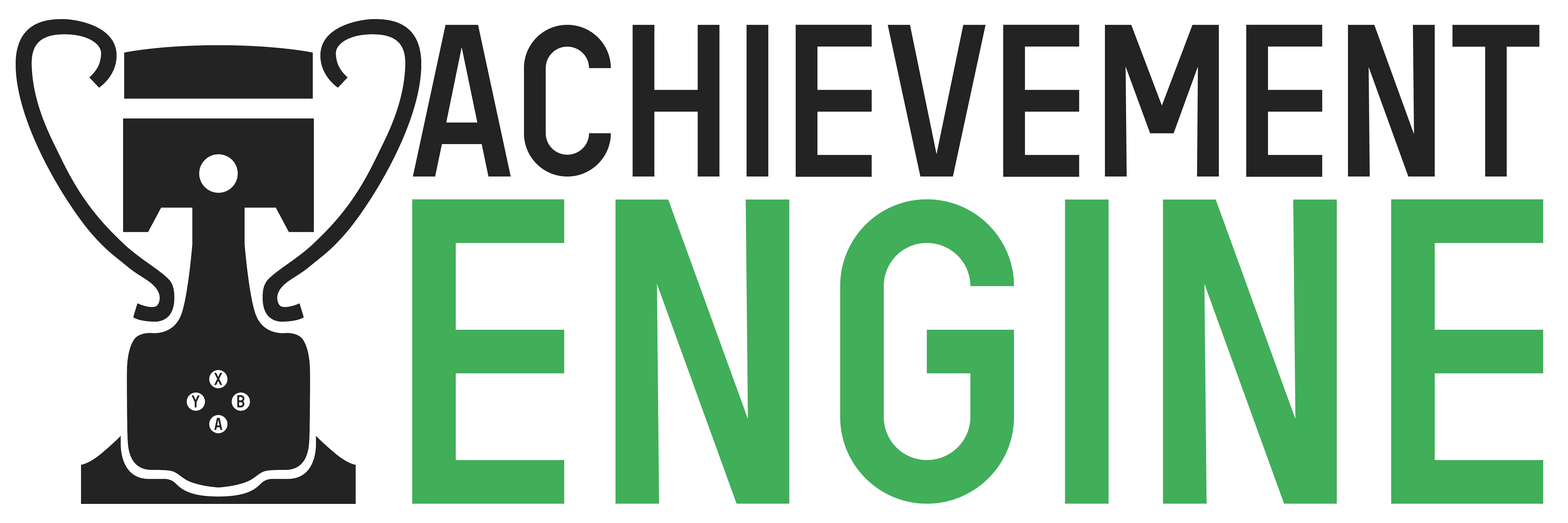
<style>
.page{position:relative;width:1568px;height:523px;background:#ffffff}
.page>*{position:absolute;margin:0}
.t1{font:217.8px "StencilettaSolid";letter-spacing:0.025em}
.t2{font:435.6px/326.7px "StencilettaSolid";letter-spacing:0.025em}
</style>
<div class="page">
<p class="t1" style="left:412px;top:25px;width:1131px;height:479px;text-align:center">ACHIEVEMENT<br><span class="t2">ENGINE</span></p>
</div>
